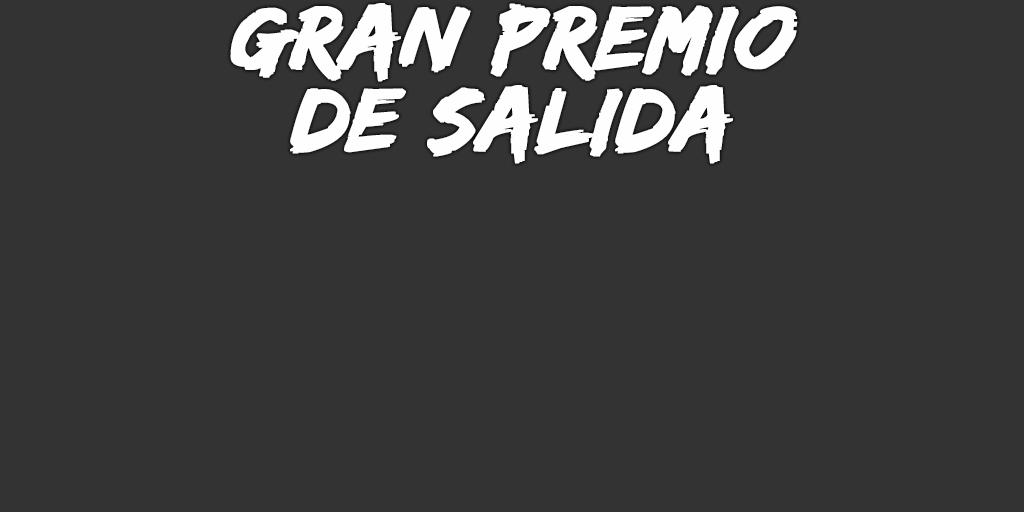
<style>
.page{position:relative;width:1024px;height:512px;background:#333333}
.page>*{position:absolute;margin:0}
.t1{font:93px/82px "EdoSZ";color:#fefefe;font-weight:bold;font-style:italic;scale:1.04 1}
</style>
<div class="page">
<p class="t1" style="left:230px;top:3px;width:568px;height:161px;text-align:center">gran premio<br>de salida</p>
</div>
